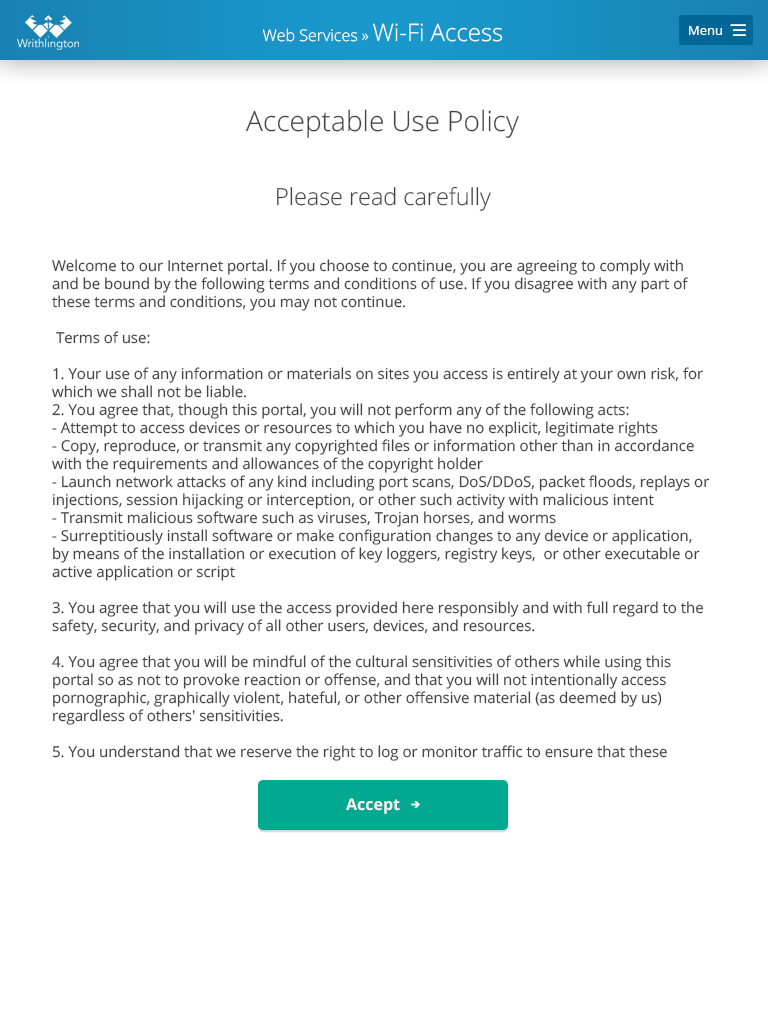
<style>
.page{position:relative;width:768px;height:1024px;background:#ffffff}
.page>*{position:absolute;margin:0}
.t1{font:16px "OpenSans-Light";color:#ffffff}
.t2{font:24px "OpenSans-Light";color:#ffffff}
.t3{font:13px "OpenSans";color:#ffffff}
.t4{font:28px "OpenSans-Light";color:#444444}
.t5{font:23.4px "OpenSans-Light";color:#444444}
.t6{font:15px "OpenSans";color:#444444}
.t7{font:16px "OpenSans-Bold";color:#f6f6f6}
</style>
<div class="page">
<p class="t1" style="left:262px;top:23px;width:241px;height:19px">Web Services » <span class="t2">Wi-Fi Access</span></p>
<p class="t3" style="left:689px;top:26px;width:33px;height:9px">Menu</p>
<p class="t4" style="left:246px;top:109px;width:273px;height:29px">Acceptable Use Policy</p>
<p class="t5" style="left:277px;top:186px;width:214px;height:25px">Please read carefully</p>
<p class="t6" style="left:52px;top:259px;width:658px;height:502px">Welcome to our Internet portal. If you choose to continue, you are agreeing to comply with and be bound by the following terms and conditions of use. If you disagree with any part of these terms and conditions, you may not continue.<br><br> Terms of use:<br><br>1. Your use of any information or materials on sites you access is entirely at your own risk, for which we shall not be liable.<br>2. You agree that, though this portal, you will not perform any of the following acts: <br>- Attempt to access devices or resources to which you have no explicit, legitimate rights <br>- Copy, reproduce, or transmit any copyrighted files or information other than in accordance with the requirements and allowances of the copyright holder <br>- Launch network attacks of any kind including port scans, DoS/DDoS, packet floods, replays or injections, session hijacking or interception, or other such activity with malicious intent <br>- Transmit malicious software such as viruses, Trojan horses, and worms <br>- Surreptitiously install software or make configuration changes to any device or application, by means of the installation or execution of key loggers, registry keys,  or other executable or active application or script <br><br>3. You agree that you will use the access provided here responsibly and with full regard to the safety, security, and privacy of all other users, devices, and resources. <br><br>4. You agree that you will be mindful of the cultural sensitivities of others while using this portal so as not to provoke reaction or offense, and that you will not intentionally access pornographic, graphically violent, hateful, or other offensive material (as deemed by us) regardless of others' sensitivities. <br><br>5. You understand that we reserve the right to log or monitor traffic to ensure that these terms are being followed. <br><br>6. You understand that unauthorized use of resources through this portal may give rise to a claim for damages and/or be a criminal offense.</p>
<p class="t7" style="left:346px;top:798px;width:54px;height:16px">Accept</p>
</div>
